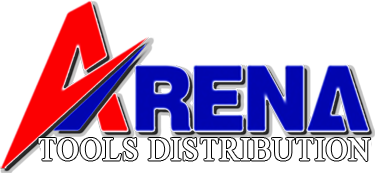
<style>
.page{position:relative;width:375px;height:173px;background:#ffffff}
.page>*{position:absolute;margin:0}
.t1{font:32.5px "TimesNewRomanPSMT";color:#ffffff;font-weight:bold;scale:0.94 1}
</style>
<div class="page">
<p class="t1" style="left:38px;top:138px;width:333px;height:23px">TOOLS DISTRIBUTION</p>
</div>
